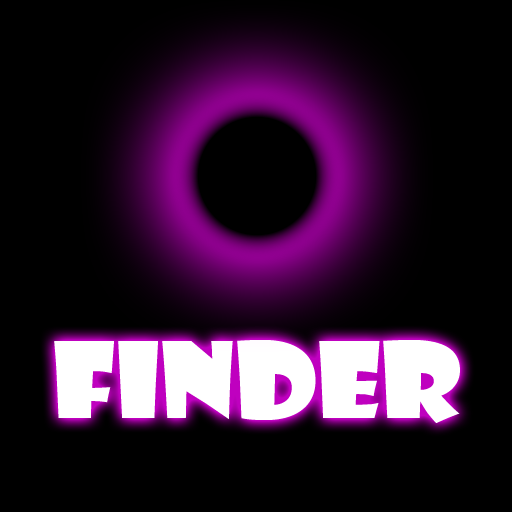
<style>
.page{position:relative;width:512px;height:512px;background:#000000}
.page>*{position:absolute;margin:0}
.t1{font:102px "ShowcardGothic-Reg";color:#ffffff;scale:1.14 1}
</style>
<div class="page">
<p class="t1" style="left:54px;top:340px;width:406px;height:83px">FINDER</p>
</div>
